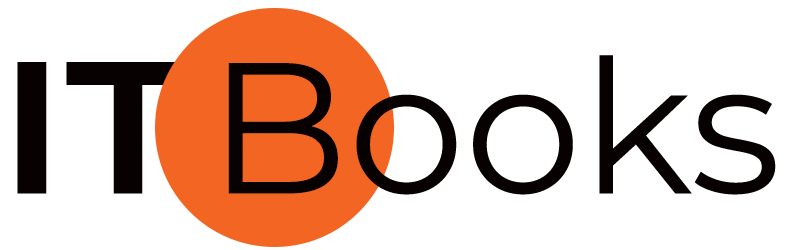
<style>
.page{position:relative;width:787px;height:250px;background:#ffffff}
.page>*{position:absolute;margin:0}
.t1{font:186px "AcuminConcept_616wght_115wdth";color:#080101}
.t2{font:186px "Montserrat-Regular";color:#080101}
</style>
<div class="page">
<p class="t1" style="left:17px;top:62px;width:173px;height:132px">IT</p>
<p class="t2" style="left:228px;top:55px;width:548px;height:140px">Books</p>
</div>
